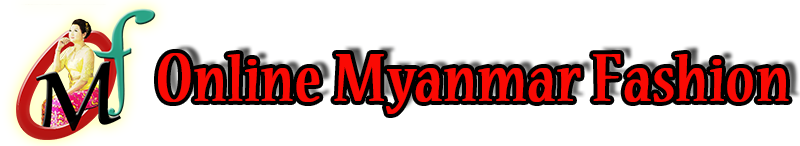
<style>
.page{position:relative;width:800px;height:146px;background:#ffffff}
.page>*{position:absolute;margin:0}
.t1{font:68.8px "NuevaStd-Cond";color:#fa0a04;font-weight:bold;scale:1.12 1}
.t2{font:75.1px "NuevaStd-Cond";color:#fa0a04;font-weight:bold;scale:1.12 1}
</style>
<div class="page">
<p class="t1" style="left:158px;top:53px;width:631px;height:61px"><span class="t2">O</span>nline <span class="t2">M</span>yanmar <span class="t2">F</span>ashion</p>
</div>
